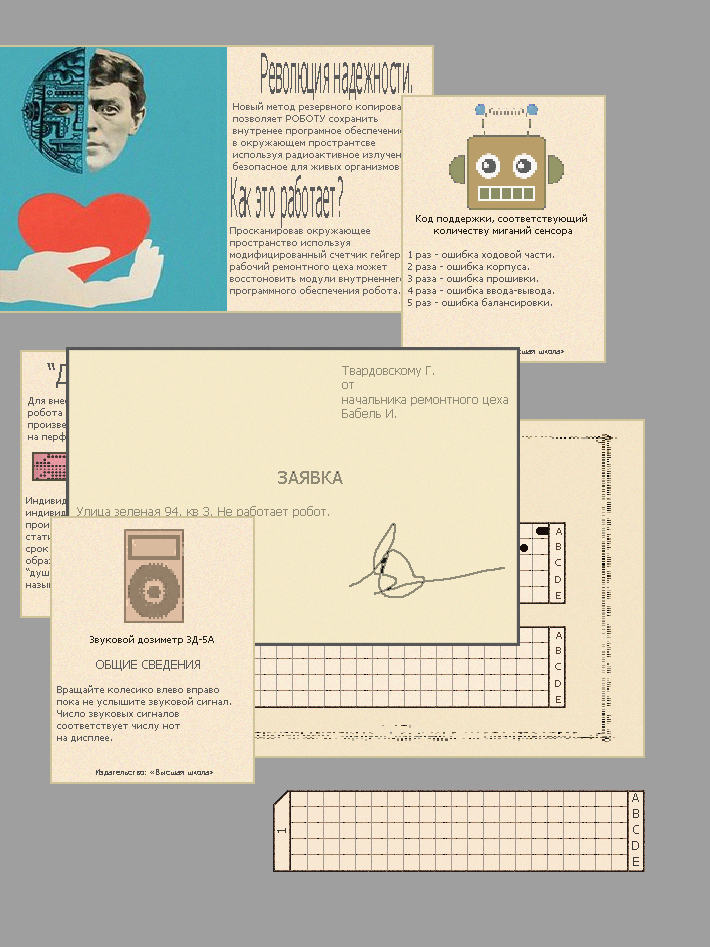
<style>
.page{position:relative;width:710px;height:947px;background:#9f9f9f}
.page>*{position:absolute;margin:0}
.t1{font:54.6px "Tahoma";color:#5a5a5a;scale:0.24 1}
.t2{font:10px "Tahoma";color:#636363}
.t3{font:10px "Tahoma";color:#222019}
.t4{font:10px "Tahoma";color:#585858}
.t5{font:10px "Tahoma"}
.t6{font:12px "Tahoma";color:#585858}
.t7{font:8px "Tahoma";color:#4e4e4e}
.t8{font:12px "Tahoma";color:#3a3935}
.t9{font:11.7px "Tahoma";color:#3a3935}
</style>
<div class="page">
<p class="t1" style="left:261px;top:53px;width:151px;height:47px">Революция надежности.</p>
<p class="t2" style="left:233px;top:102px;width:185px;height:70px">Новый метод резервного копирования<br>позволяет РОБОТУ сохранить<br>внутренее програмное обеспечение<br>в окружающем пространтсве<br>используя радиоактивное излучение<br>безопасное для живых организмов.</p>
<p class="t1" style="left:231px;top:175px;width:112px;height:53px">Как это работает?</p>
<p class="t3" style="left:416px;top:214px;width:171px;height:22px;text-align:center">Код поддержки, соответствующий <br>количеству миганий сенсора</p>
<p class="t2" style="left:230px;top:227px;width:175px;height:69px">Просканировав окружающее <br>пространство используя <br>модифицированный счетчик гейгера <br>рабочий ремонтного цеха может <br>восстоновить модули внутрненнего <br>программного обеспечения робота.</p>
<p class="t4" style="left:408px;top:250px;width:146px;height:58px">1 раз - ошибка ходовой части.<br>2 раза - ошибка корпуса.<br>3 раза - ошибка прошивки.<br>4 раза - ошибка ввода-вывода.<br>5 раз - ошибка балансировки.</p>
<p class="t5" style="left:28px;top:397px;width:171px;height:45px">Для внесения гармонии в энтропию<br>робота используется музыкальное<br>произведение записанное <br>на перфокартах.</p>
<p class="t3" style="left:90px;top:635px;width:124px;height:10px">Звуковой дозиметр ЗД-5А</p>
<p class="t6" style="left:96px;top:660px;width:104px;height:11px">ОБЩИЕ СВЕДЕНИЯ</p>
<p class="t4" style="left:57px;top:685px;width:174px;height:57px">Вращайте колесико влево вправо<br>пока не услышите звуковой сигнал.<br>Число звуковых сигналов <br>соответствует числу нот <br>на дисплее.</p>
<p class="t7" style="left:96px;top:769px;width:117px;height:7px">Издательство: «Высшая школа»</p>
<p class="t8" style="left:632px;top:793px;width:7px;height:9px">A</p>
<p class="t8" style="left:633px;top:809px;width:6px;height:9px">B</p>
<p class="t9" style="left:277px;top:828px;width:9px;height:5px;rotate:-90deg">1</p>
<p class="t8" style="left:633px;top:825px;width:6px;height:9px">C</p>
<p class="t8" style="left:632px;top:841px;width:7px;height:9px">D</p>
<p class="t8" style="left:633px;top:857px;width:6px;height:9px">E</p>
</div>
